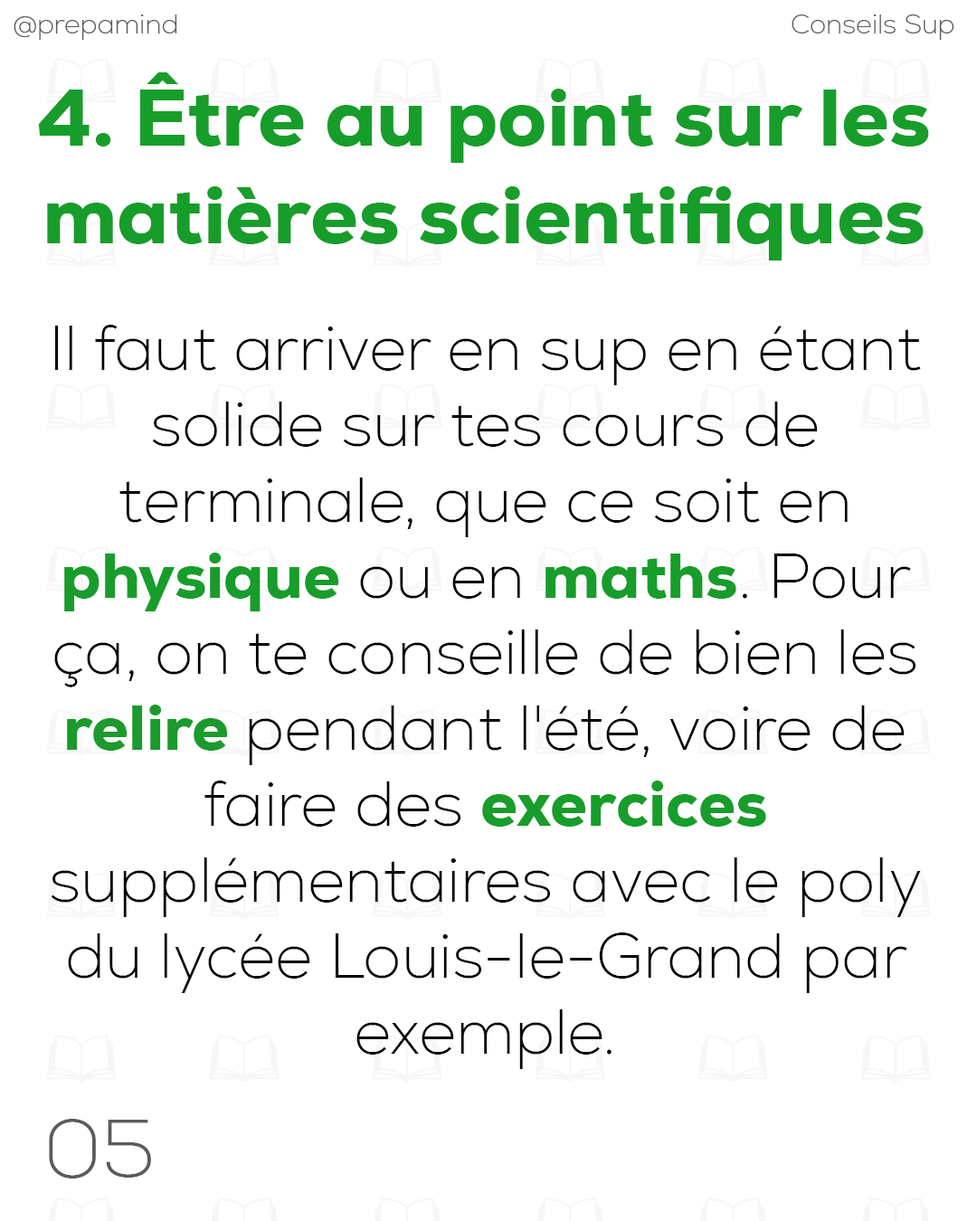
<style>
.page{position:relative;width:977px;height:1221px;background:#ffffff}
.page>*{position:absolute;margin:0}
.t1{font:27.1px "Nexa-ExtraLight";color:#5e5a5a}
.t2{font:81.2px "Nexa-Heavy";color:#179d2a}
.t3{font:63.3px "Nexa-ExtraLight";color:#000000}
.t4{font:63.3px "Nexa-Heavy";color:#179d2a}
.t5{font:63.3px "Nexa-Heavy";color:#1a9b2c}
.t6{font:81.7px "Nexa-ExtraLight";color:#5e5a5a}
</style>
<div class="page">
<p class="t1" style="left:14px;top:14px;width:163px;height:26px">@prepamind</p>
<p class="t1" style="left:791px;top:14px;width:163px;height:26px">Conseils Sup</p>
<p class="t2" style="left:38px;top:72px;width:891px;height:188px;text-align:center">4. Être au point sur les matières scientifiques</p>
<p class="t3" style="left:51px;top:325px;width:870px;height:744px;text-align:center">Il faut arriver en sup en étant solide sur tes cours de terminale, que ce soit en <span class="t4">physique</span> ou en <span class="t4">maths</span>. Pour ça, on te conseille de bien les <span class="t5">relire </span>pendant l'été, voire de faire des <span class="t4">exercices</span> supplémentaires avec le poly du lycée Louis-le-Grand par exemple.</p>
<p class="t6" style="left:49px;top:1119px;width:102px;height:59px">05</p>
</div>
